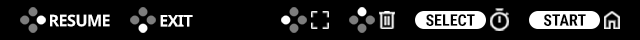
<style>
.page{position:relative;width:640px;height:40px;background:#000000}
.page>*{position:absolute;margin:0}
.t1{font:16px "NotoSans-Bold";letter-spacing:-0.03em;color:#ffffff}
.t2{font:16px "RobotoCondensed-Bold";color:#000000}
</style>
<div class="page">
<p class="t1" style="left:50px;top:14px;width:60px;height:13px">RESUME</p>
<p class="t1" style="left:160px;top:15px;width:33px;height:12px">EXIT</p>
<p class="t2" style="left:426px;top:14px;width:49px;height:12px">SELECT</p>
<p class="t2" style="left:544px;top:14px;width:42px;height:12px">START</p>
</div>
